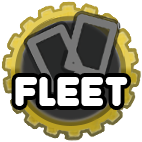
<style>
.page{position:relative;width:142px;height:142px;background:#ffffff}
.page>*{position:absolute;margin:0}
.t1{font:48px "Junegull";color:#ffffff}
</style>
<div class="page">
<p class="t1" style="left:15px;top:77px;width:113px;height:29px">Fleet</p>
</div>
